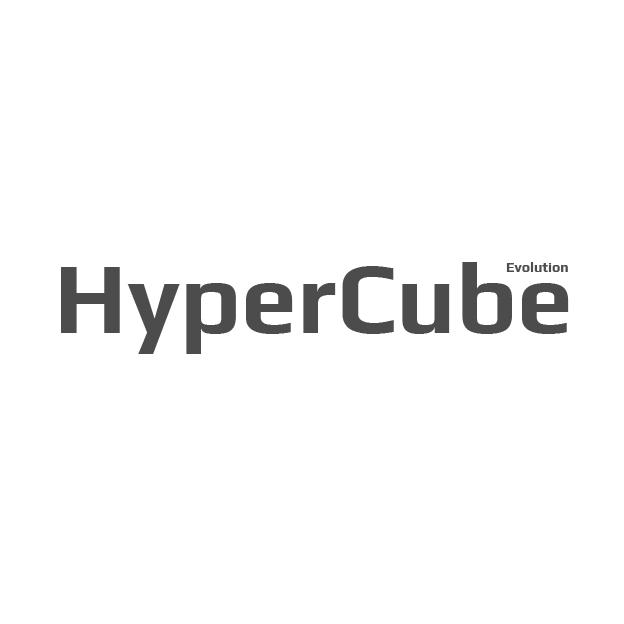
<style>
.page{position:relative;width:624px;height:624px;background:#ffffff}
.page>*{position:absolute;margin:0}
.t1{font:100px "Play-Bold";color:#4c4c4c}
.t2{font:14px "Play-Bold";color:#4c4c4c}
</style>
<div class="page">
<p class="t1" style="left:61px;top:262px;width:508px;height:92px">HyperCube</p>
<p class="t2" style="left:506px;top:262px;width:62px;height:10px">Evolution</p>
</div>
